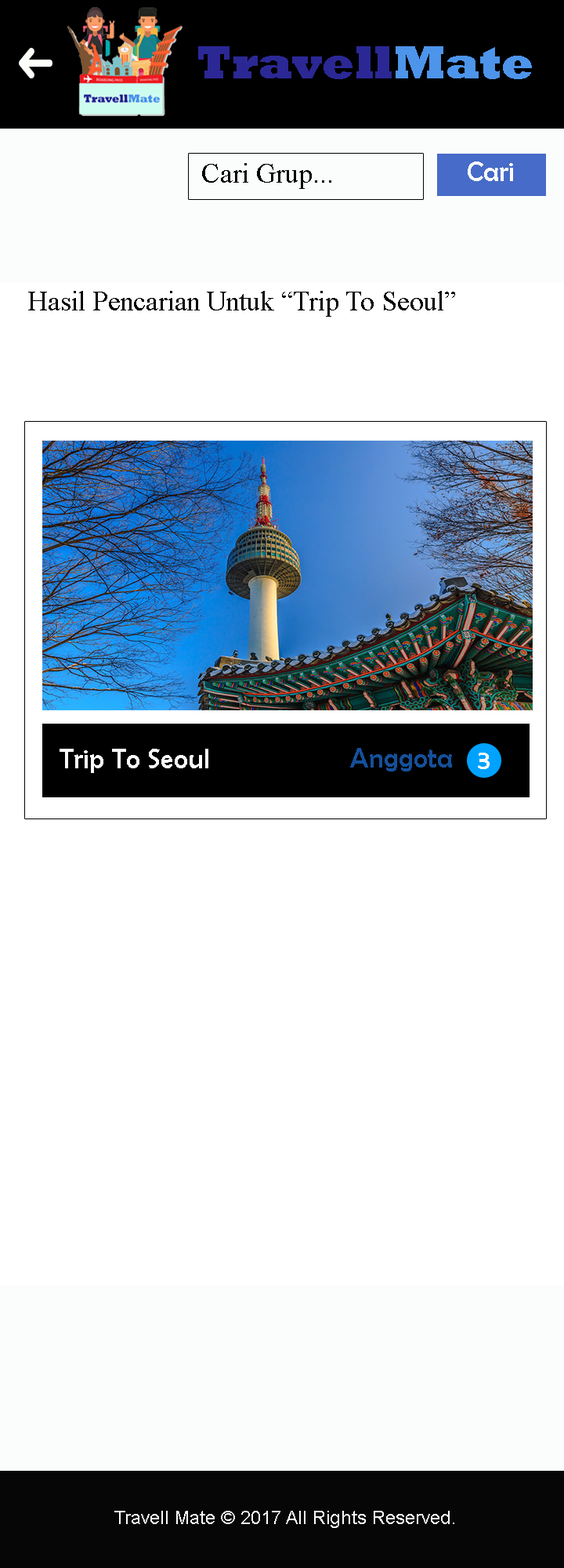
<style>
.page{position:relative;width:564px;height:1568px;background:#ffffff}
.page>*{position:absolute;margin:0}
.t1{font:47px "Rockwell-ExtraBold";color:#2b2896}
.t2{font:47px "Rockwell-ExtraBold";color:#4d94eb}
.t3{font:28.2px "BerlinSansFB-Reg";color:#fafbf9}
.t4{font:28.2px "TimesNewRomanPSMT";color:#030303}
.t5{font:28.2px "TimesNewRomanPSMT";color:#010101}
.t6{font:28.2px "BerlinSansFB-Reg";color:#fbfbfb}
.t7{font:28.2px "BerlinSansFB-Reg";color:#14509a}
.t8{font:28.2px "BerlinSansFB-Reg";color:#f8fafc}
.t9{font:18.8px "ArialMT";color:#fcf9f9}
</style>
<div class="page">
<p class="t1" style="left:198px;top:46px;width:334px;height:33px">Travell<span class="t2">Mate</span></p>
<p class="t3" style="left:468px;top:162px;width:46px;height:19px">Cari</p>
<p class="t4" style="left:202px;top:163px;width:130px;height:26px">Cari Grup...</p>
<p class="t5" style="left:28px;top:291px;width:428px;height:26px">Hasil Pencarian Untuk “Trip To Seoul”</p>
<p class="t6" style="left:60px;top:749px;width:149px;height:24px">Trip To Seoul</p>
<p class="t7" style="left:350px;top:748px;width:102px;height:23px">Anggota</p>
<p class="t8" style="left:478px;top:753px;width:12px;height:16px">3</p>
<p class="t9" style="left:114px;top:1511px;width:341px;height:17px">Travell Mate © 2017 All Rights Reserved.</p>
</div>
